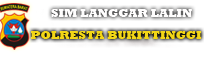
<style>
.page{position:relative;width:204px;height:57px;background:#ffffff}
.page>*{position:absolute;margin:0}
.t1{font:12px "Rockwell-ExtraBold";color:#fffefe}
.t2{font:12px "Rockwell-ExtraBold";color:#f2d40c}
</style>
<div class="page">
<p class="t1" style="left:51px;top:9px;width:141px;height:8px">SIM LANGGAR LALIN</p>
<p class="t2" style="left:31px;top:31px;width:171px;height:8px;opacity:0.96">POLRESTA BUKITTINGGI</p>
</div>
